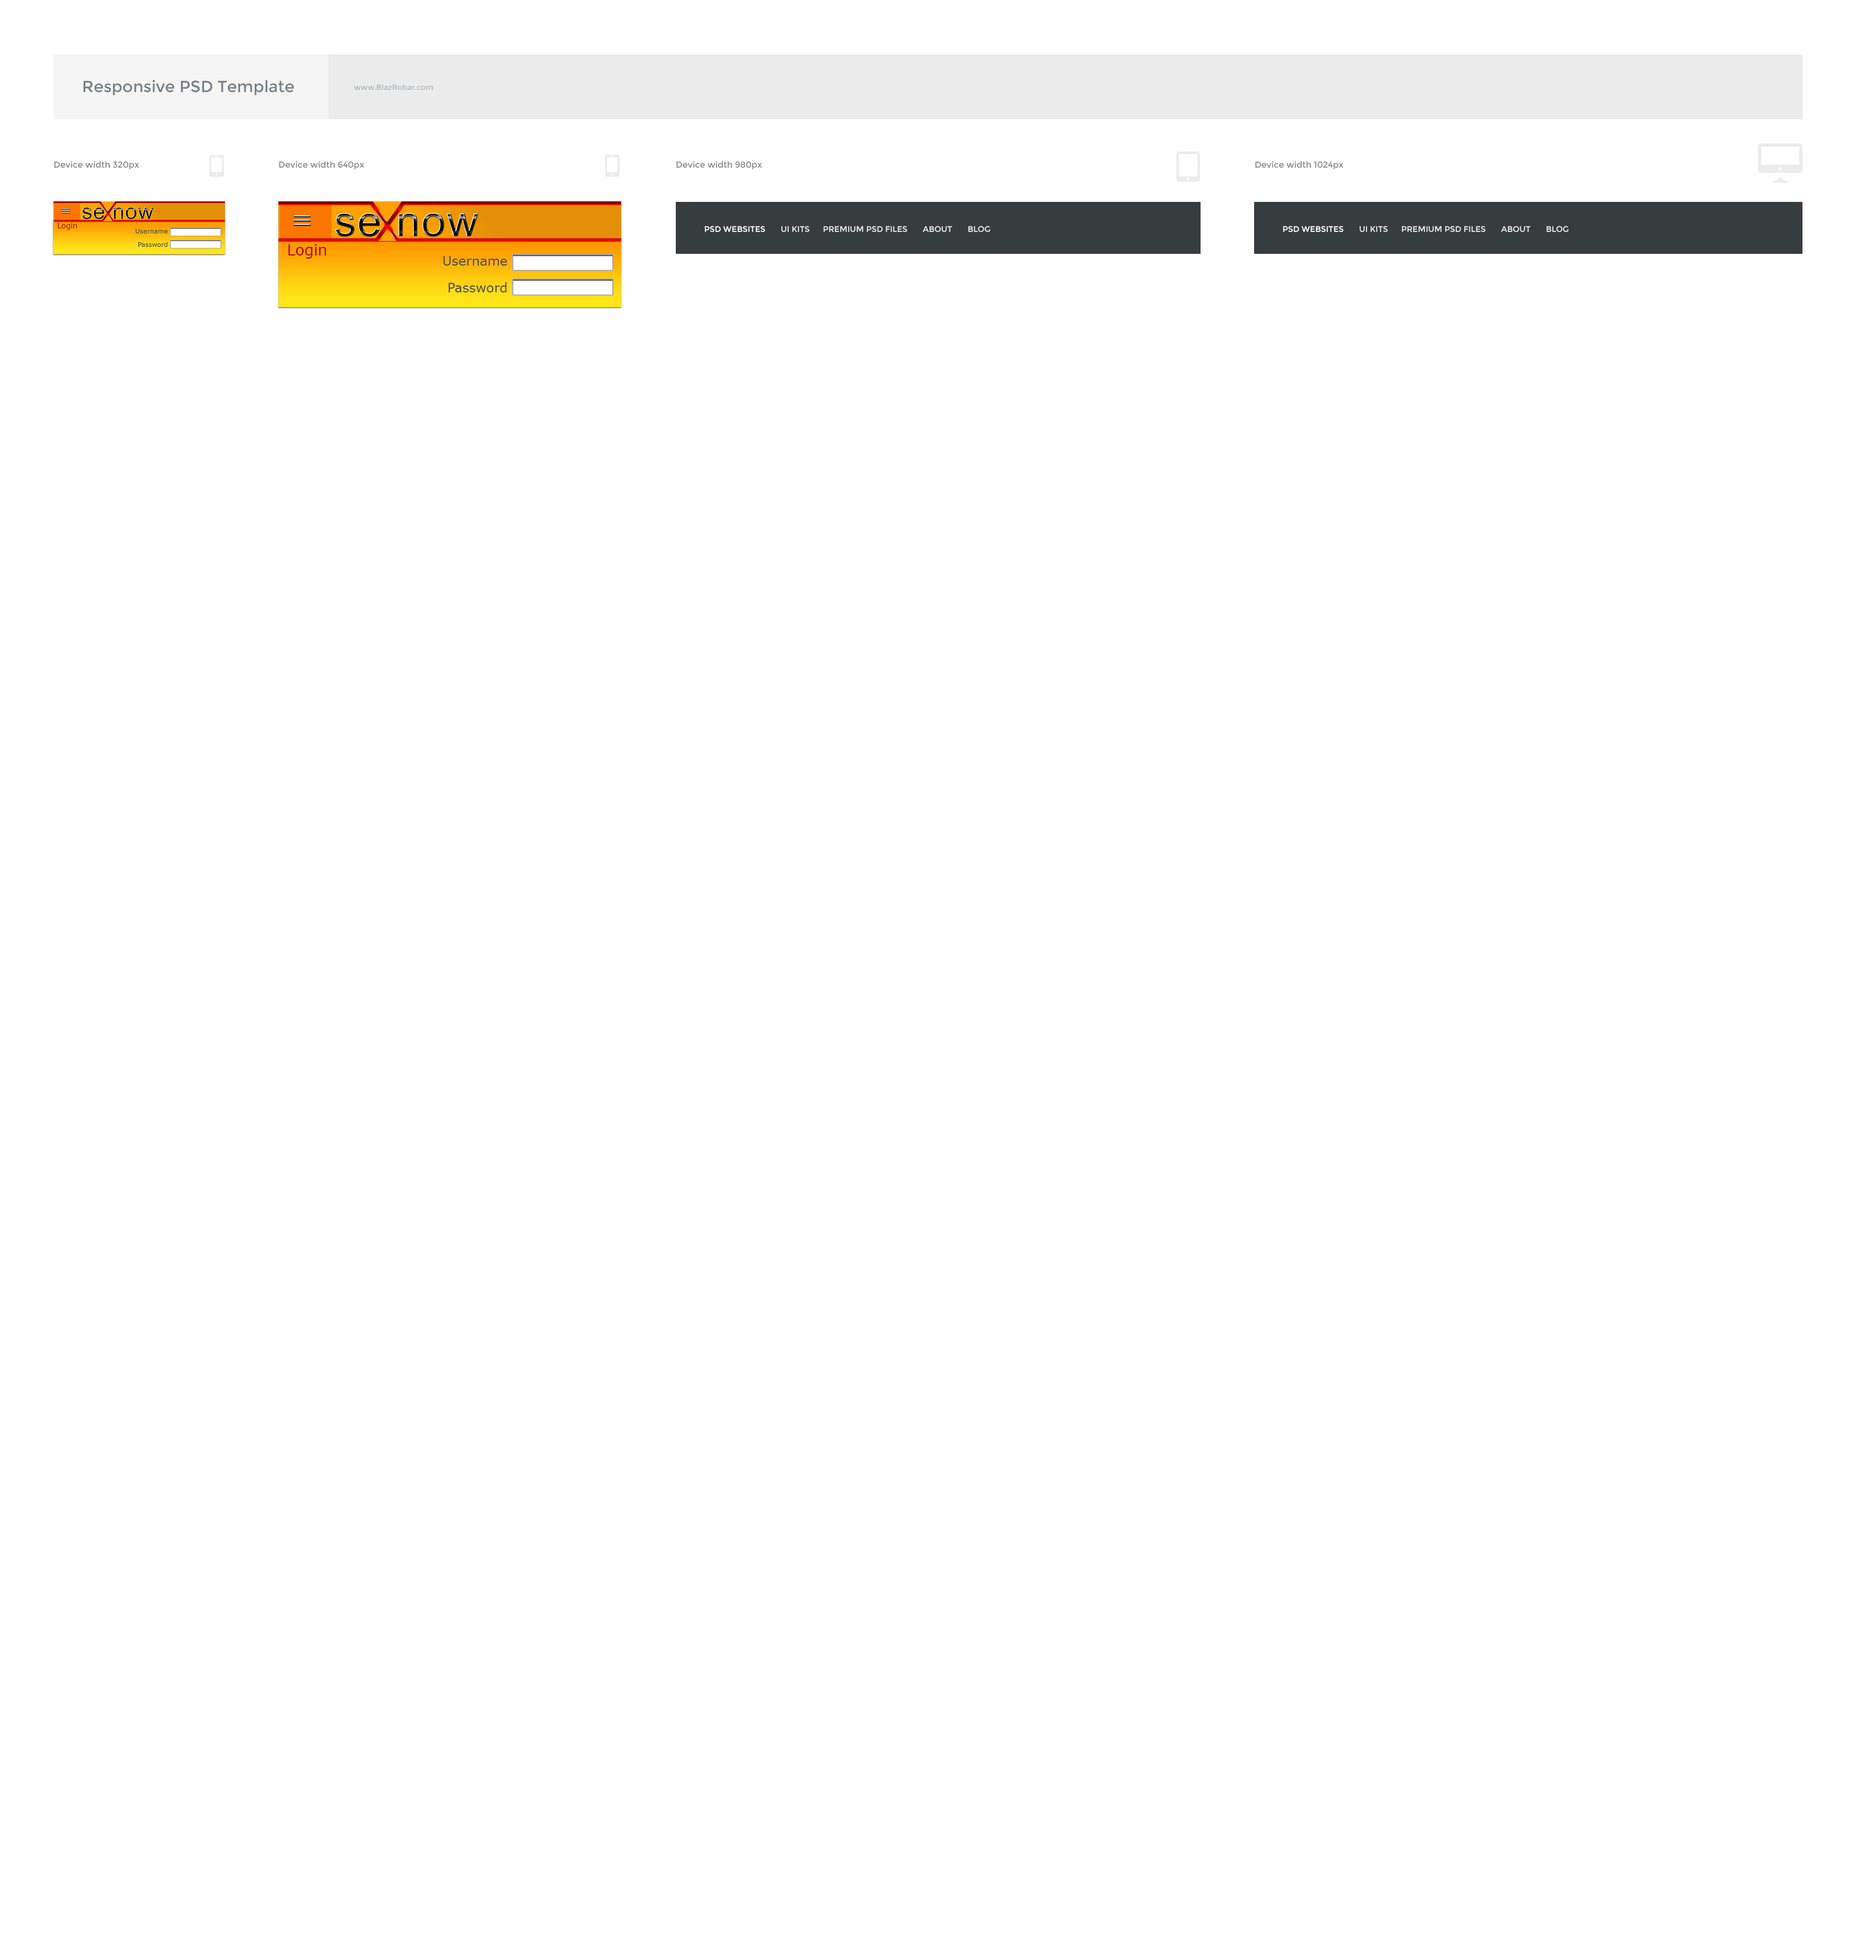
<style>
.page{position:relative;width:1856px;height:1960px;background:#ffffff}
.page>*{position:absolute;margin:0}
.t1{font:16.1px "Montserrat-Regular";color:#787f84}
.t2{font:7.5px "Montserrat-Regular";color:#afb4b8}
.t3{font:8.6px "Montserrat-Regular";color:#878787}
.t4{font:8px "Montserrat-Regular";color:#ebebeb}
.t5{font:8px "Montserrat-Regular";color:#ffffff}
</style>
<div class="page">
<p class="t1" style="left:84px;top:80px;width:210px;height:15px">Responsive PSD Template</p>
<p class="t2" style="left:354px;top:84px;width:79px;height:7px">www.BlazRobar.com</p>
<p class="t3" style="left:54px;top:161px;width:85px;height:9px">Device width 320px</p>
<p class="t3" style="left:279px;top:161px;width:85px;height:9px">Device width 640px</p>
<p class="t3" style="left:676px;top:161px;width:86px;height:9px">Device width 980px</p>
<p class="t3" style="left:1255px;top:161px;width:89px;height:9px">Device width 1024px</p>
<p class="t4" style="left:705px;top:226px;width:285px;height:6px"><span class="t5">PSD WEBSITES</span>       UI KITS      PREMIUM PSD FILES       ABOUT       BLOG</p>
<p class="t4" style="left:1283px;top:226px;width:286px;height:6px"><span class="t5">PSD WEBSITES</span>       UI KITS      PREMIUM PSD FILES       ABOUT       BLOG</p>
</div>
